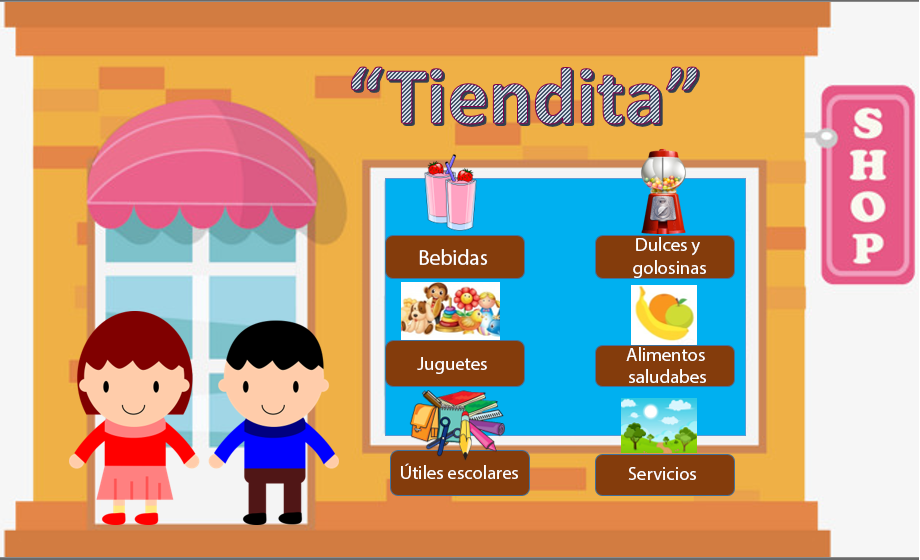
<style>
.page{position:relative;width:920px;height:560px}
.page>*{position:absolute;margin:0}
.t1{font:18.7px "MyriadPro-Regular";color:#ffffff}
.t2{font:21.3px "MyriadPro-Regular";color:#ffffff}
</style>
<div class="page">
<p class="t1" style="left:633px;top:237px;width:73px;height:41px;text-align:center">Dulces y <br>golosinas</p>
<p class="t2" style="left:419px;top:249px;width:69px;height:16px">Bebidas</p>
<p class="t1" style="left:626px;top:347px;width:80px;height:36px;text-align:center">Alimentos <br>saludabes</p>
<p class="t1" style="left:417px;top:357px;width:70px;height:17px">Juguetes</p>
<p class="t1" style="left:401px;top:463px;width:117px;height:16px">Útiles escolares</p>
<p class="t1" style="left:628px;top:467px;width:68px;height:13px">Servicios</p>
</div>
